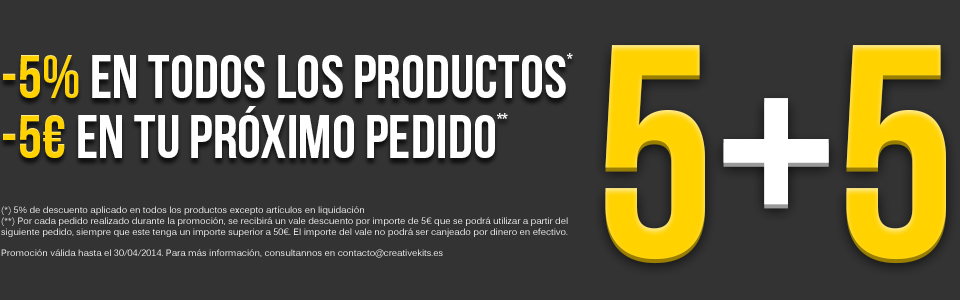
<style>
.page{position:relative;width:960px;height:300px;background:#333333}
.page>*{position:absolute;margin:0}
.t1{font:61.3px "BebasNeue";color:#ffffff}
.t2{font:61.3px "BebasNeue";color:#ffd200}
.t3{font:14px/60px "BebasNeue";color:#ffffff}
.t4{font:61.3px/60px "BebasNeue";color:#ffd200}
.t5{font:61.3px/60px "BebasNeue";color:#ffffff}
.t6{font:303.5px "BebasNeue";color:#ffd200}
.t7{font:303.5px "BebasNeue";color:#ffffff}
.t8{font:9px "Kalinga"}
</style>
<div class="page">
<p class="t1" style="left:3px;top:53px;width:570px;height:105px"><span class="t2">-5% </span>en todos los productos<span class="t3">*<br></span><span class="t4">-5€ </span><span class="t5">en tu próximo pedido</span><span class="t3">**</span></p>
<p class="t6" style="left:605px;top:49px;width:341px;height:215px">5<span class="t7">+</span>5</p>
<p class="t6" style="left:605px;top:45px;width:341px;height:215px">5<span class="t7">+</span>5</p>
<p class="t8" style="left:1px;top:206px;width:567px;height:52px">(*) 5% de descuento aplicado en todos los productos excepto artículos en liquidación<br>(**) Por cada pedido realizado durante la promoción, se recibirá un vale descuento por importe de 5€ que se podrá utilizar a partir del<br>siguiente pedido, siempre que este tenga un importe superior a 50€. El importe del vale no podrá ser canjeado por dinero en efectivo.<br><br>Promoción válida hasta el 30/04/2014. Para más información, consultannos en contacto@creativekits.es</p>
</div>
